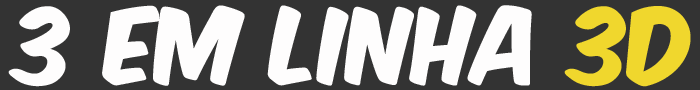
<style>
.page{position:relative;width:700px;height:90px;background:#333333}
.page>*{position:absolute;margin:0}
.t1{font:90px "KomikaAxis";color:#fefdfd}
.t2{font:90px "KomikaAxis";color:#f0d72d}
</style>
<div class="page">
<p class="t1" style="left:8px;top:5px;width:683px;height:82px">3 em linha <span class="t2">3d</span></p>
</div>
